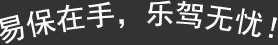
<style>
.page{position:relative;width:278px;height:45px;background:#333333}
.page>*{position:absolute;margin:0}
.t1{font:28.6px "SimHei";letter-spacing:0.01em;color:#ffffff}
</style>
<div class="page">
<p class="t1" style="left:0px;top:0px;width:277px;height:44px">易保在手，乐驾无忧！</p>
</div>
